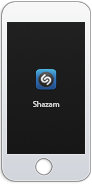
<style>
.page{position:relative;width:92px;height:184px}
.page>*{position:absolute;margin:0}
.t1{font:8px "MyriadPro-Regular";color:#cdcecf}
</style>
<div class="page">
<p class="t1" style="left:33px;top:101px;width:27px;height:6px">Shazam</p>
</div>
